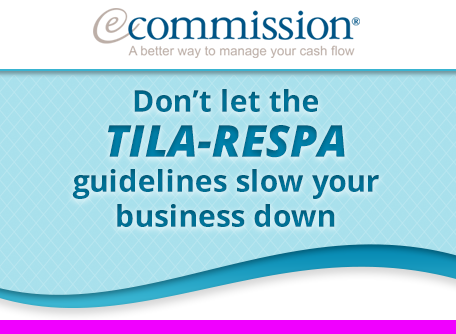
<style>
.page{position:relative;width:456px;height:334px;background:#ffffff}
.page>*{position:absolute;margin:0}
.t1{font:30px/35px "OpenSans-Bold";color:#007094}
.t2{font:30px/45px "OpenSans-Bold";color:#007094}
.t3{font:44px/45px "OpenSans-ExtraboldItalic";color:#007094}
</style>
<div class="page">
<p class="t1" style="left:72px;top:89px;width:307px;height:138px;text-align:center"><span class="t2">Don’t let the<br></span><span class="t3">TILA-RESPA<br></span>guidelines slow your<br>business down</p>
</div>
